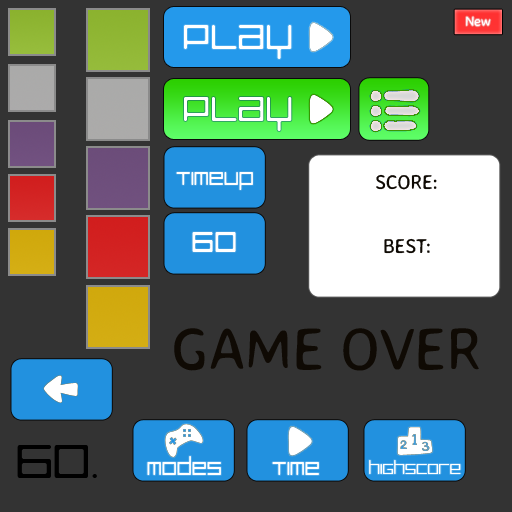
<style>
.page{position:relative;width:512px;height:512px;background:#333333}
.page>*{position:absolute;margin:0}
.t1{font:14px "AveriaSansLibre-Regular";letter-spacing:-0.02em;color:#ffffff}
.t2{font:43.9px "LuggageRoundLight";letter-spacing:-0.02em;color:#ffffff}
.t3{font:24px "LuggageRoundLight";letter-spacing:-0.02em;color:#ffffff}
.t4{font:20px "AveriaSansLibre-Regular";letter-spacing:-0.02em;color:#0f0a04}
.t5{font:36px "LuggageRoundLight";letter-spacing:-0.02em;color:#ffffff}
.t6{font:60px "AveriaSansLibre-Regular";letter-spacing:-0.02em;color:#0f0a04}
.t7{font:60px "LuggageRoundLight";letter-spacing:-0.02em;color:#000000}
.t8{font:18px "LuggageRoundLight";letter-spacing:-0.02em;color:#ffffff}
</style>
<div class="page">
<p class="t1" style="left:466px;top:16px;width:25px;height:11px">New</p>
<p class="t2" style="left:184px;top:25px;width:108px;height:34px">Play</p>
<p class="t2" style="left:184px;top:97px;width:108px;height:34px">Play</p>
<p class="t3" style="left:176px;top:172px;width:77px;height:18px">TimeUp</p>
<p class="t4" style="left:376px;top:174px;width:61px;height:16px">SCORE:</p>
<p class="t5" style="left:192px;top:232px;width:44px;height:20px">60</p>
<p class="t4" style="left:384px;top:238px;width:46px;height:16px">BEST:</p>
<p class="t6" style="left:174px;top:328px;width:305px;height:43px">GAME OVER</p>
<p class="t7" style="left:17px;top:445px;width:80px;height:33px">60.</p>
<p class="t3" style="left:147px;top:456px;width:74px;height:19px">modes</p>
<p class="t3" style="left:272px;top:462px;width:47px;height:13px">time</p>
<p class="t8" style="left:369px;top:460px;width:92px;height:14px">highscore</p>
</div>
